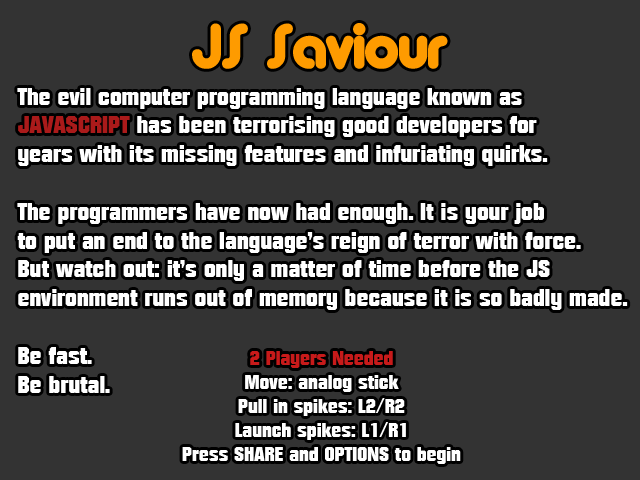
<style>
.page{position:relative;width:640px;height:480px;background:#333333}
.page>*{position:absolute;margin:0}
.t1{font:60px "AlbaMatter";color:#fe9b00}
.t2{font:24px "Autumn";color:#ffffff}
.t3{font:24px "Autumn";color:#aa1a1a}
.t4{font:20px "Autumn";color:#ffffff}
.t5{font:20px "Autumn";color:#c71a1a}
</style>
<div class="page">
<p class="t1" style="left:192px;top:23px;width:256px;height:47px">JS Saviour</p>
<p class="t2" style="left:17px;top:88px;width:611px;height:305px">The evil computer programming language known as<br><span class="t3">JAVASCRIPT</span> has been terrorising good developers for<br>years with its missing features and infuriating quirks.<br><br>The programmers have now had enough. It is your job<br>to put an end to the language’s reign of terror with force.<br>But watch out: it’s only a matter of time before the JS<br>environment runs out of memory because it is so badly made.<br><br>Be fast.<br>Be brutal.</p>
<p class="t4" style="left:182px;top:351px;width:279px;height:113px;text-align:center"><span class="t5">2 Players Needed<br></span>Move: analog stick<br>Pull in spikes: L2/R2<br>Launch spikes: L1/R1<br>Press SHARE and OPTIONS to begin</p>
</div>
